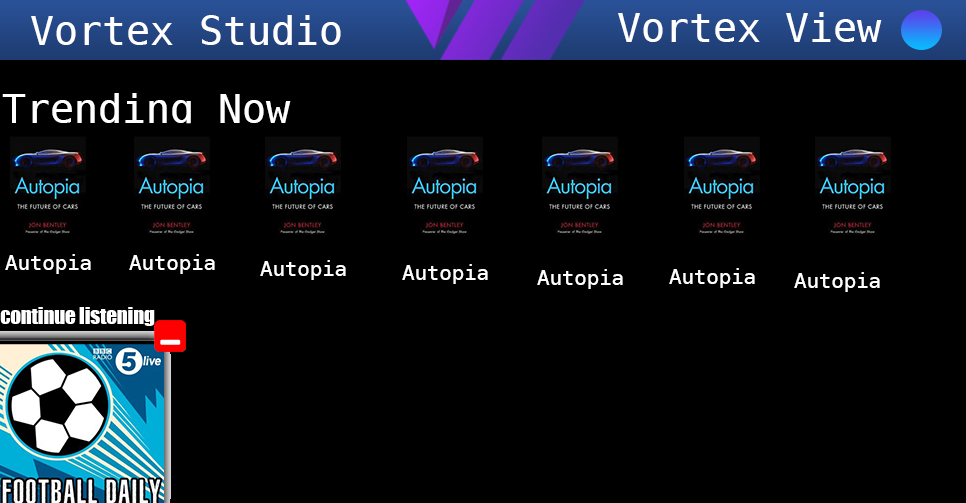
<style>
.page{position:relative;width:966px;height:503px;background:#000000}
.page>*{position:absolute;margin:0}
.t1{font:40px "DejaVuSansMono";color:#ffffff}
.t2{font:20.7px "DejaVuSansMono";color:#ffffff}
.t3{font:20.5px "Impact";color:#ffffff}
</style>
<div class="page">
<p class="t1" style="left:31px;top:15px;width:310px;height:30px">Vortex Studio</p>
<p class="t1" style="left:618px;top:12px;width:264px;height:30px">Vortex View</p>
<p class="t1" style="left:2px;top:93px;width:289px;height:38px">Trending Now</p>
<p class="t2" style="left:5px;top:254px;width:86px;height:20px">Autopia</p>
<p class="t2" style="left:129px;top:254px;width:86px;height:20px">Autopia</p>
<p class="t2" style="left:260px;top:260px;width:86px;height:20px">Autopia</p>
<p class="t2" style="left:402px;top:264px;width:86px;height:20px">Autopia</p>
<p class="t2" style="left:537px;top:269px;width:86px;height:20px">Autopia</p>
<p class="t2" style="left:669px;top:268px;width:86px;height:20px">Autopia</p>
<p class="t2" style="left:794px;top:272px;width:86px;height:20px">Autopia</p>
<p class="t3" style="left:0px;top:307px;width:155px;height:19px">continue listening</p>
</div>
